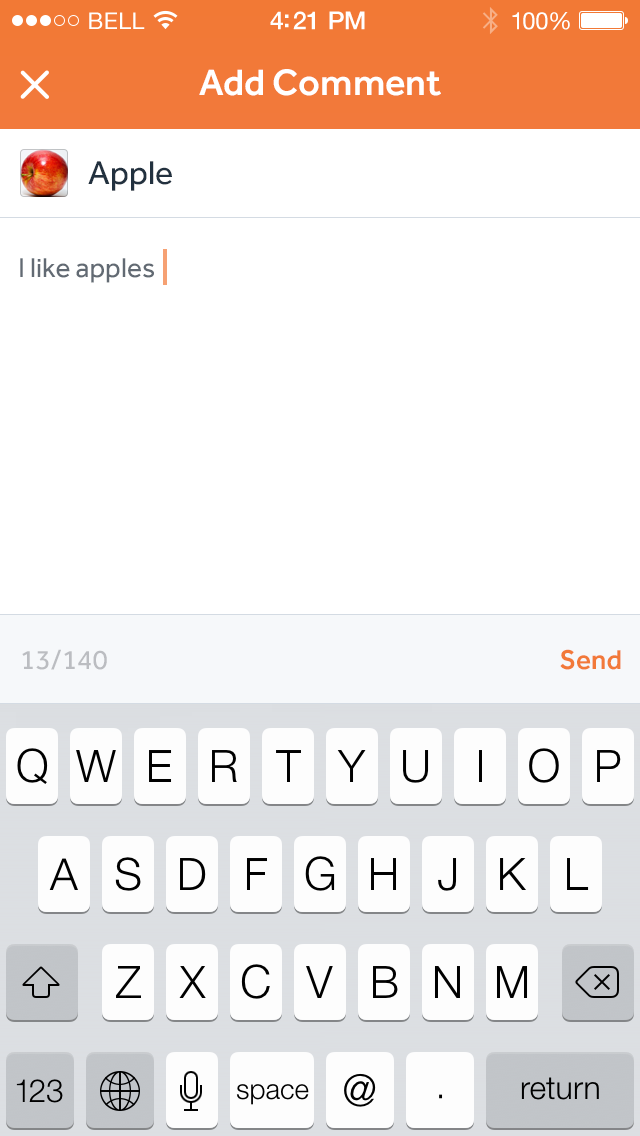
<style>
.page{position:relative;width:640px;height:1136px;background:#ffffff}
.page>*{position:absolute;margin:0}
.t1{font:23px "HelveticaNeue";letter-spacing:0.02em;color:#ffffff}
.t2{font:25px "HelveticaNeue-Medium";letter-spacing:-0.02em;color:#ffffff}
.t3{font:24px "HelveticaNeue";letter-spacing:-0.02em;color:#ffffff}
.t4{font:38px "Effra-Medium";color:#ffffff}
.t5{font:34px "Effra-Regular";color:#22313f}
.t6{font:28px "Effra-Regular";color:#626a73}
.t7{font:28px "Effra-Regular";color:#bbbdc1}
.t8{font:28px "Effra-Medium";color:#f27939}
</style>
<div class="page">
<p class="t1" style="left:89px;top:12px;width:56px;height:17px">BELL</p>
<p class="t2" style="left:270px;top:11px;width:95px;height:19px">4:21 PM</p>
<p class="t3" style="left:512px;top:12px;width:58px;height:18px">100%</p>
<p class="t4" style="left:199px;top:69px;width:242px;height:27px">Add Comment</p>
<p class="t5" style="left:88px;top:161px;width:84px;height:30px">Apple</p>
<p class="t6" style="left:20px;top:258px;width:134px;height:25px">I like apples</p>
<p class="t7" style="left:22px;top:649px;width:85px;height:21px">13/140</p>
<p class="t8" style="left:560px;top:649px;width:61px;height:21px">Send</p>
</div>
